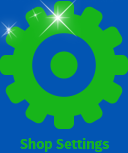
<style>
.page{position:relative;width:128px;height:153px;background:#0255b3}
.page>*{position:absolute;margin:0}
.t1{font:14px "FiraSansOT-Bold";color:#17b51a}
</style>
<div class="page">
<p class="t1" style="left:20px;top:138px;width:89px;height:14px">Shop Settings</p>
</div>
